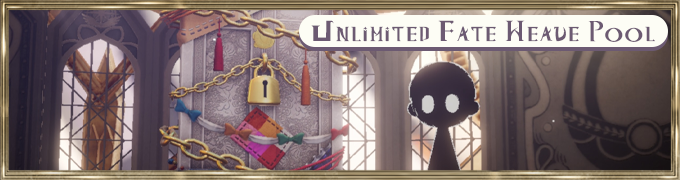
<style>
.page{position:relative;width:680px;height:180px}
.page>*{position:absolute;margin:0}
.t1{font:27.4px "MagiaRecordRegular";color:#6c5a72;font-variant:small-caps;scale:1.25 1}
</style>
<div class="page">
<p class="t1" style="left:311px;top:20px;width:344px;height:22px">Unlimited Fate Weave Pool</p>
</div>
